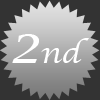
<style>
.page{position:relative;width:100px;height:100px;background:#333333}
.page>*{position:absolute;margin:0}
.t1{font:28.9px "LucidaCalligraphy-Italic";color:#ffffff}
.t2{font:53.9px "LucidaCalligraphy-Italic";color:#ffffff}
</style>
<div class="page">
<p class="t1" style="left:12px;top:34px;width:77px;height:29px"><span class="t2">2</span>nd</p>
</div>
